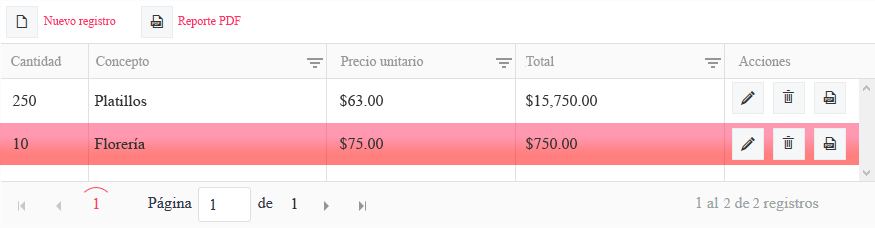
<style>
.page{position:relative;width:875px;height:228px;background:#ffffff}
.page>*{position:absolute;margin:0}
.t1{font:14px "TimesNewRomanPSMT";color:#999999}
.t2{font:16px "TimesNewRomanPSMT";color:#333333}
</style>
<div class="page">
<p class="t1" style="left:11px;top:56px;width:51px;height:10px">Cantidad</p>
<p class="t1" style="left:96px;top:56px;width:53px;height:13px">Concepto</p>
<p class="t1" style="left:340px;top:56px;width:84px;height:10px">Precio unitario</p>
<p class="t1" style="left:526px;top:56px;width:28px;height:10px">Total</p>
<p class="t1" style="left:738px;top:56px;width:53px;height:10px">Acciones</p>
<p class="t2" style="left:12px;top:95px;width:24px;height:11px">250</p>
<p class="t2" style="left:94px;top:95px;width:53px;height:11px">Platillos</p>
<p class="t2" style="left:340px;top:94px;width:43px;height:13px">$63.00</p>
<p class="t2" style="left:526px;top:94px;width:71px;height:14px">$15,750.00</p>
<p class="t2" style="left:340px;top:137px;width:43px;height:13px">$75.00</p>
<p class="t2" style="left:526px;top:137px;width:51px;height:13px">$750.00</p>
<p class="t2" style="left:14px;top:138px;width:14px;height:11px">10</p>
<p class="t2" style="left:94px;top:138px;width:52px;height:11px">Florería</p>
<p class="t2" style="left:292px;top:198px;width:5px;height:11px">1</p>
<p class="t1" style="left:724px;top:198px;width:7px;height:10px">2</p>
<p class="t1" style="left:753px;top:198px;width:7px;height:10px">2</p>
</div>
